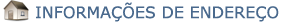
<style>
.page{position:relative;width:290px;height:23px;background:#ffffff}
.page>*{position:absolute;margin:0}
.t1{font:16px "Verdana";color:#49698d}
</style>
<div class="page">
<p class="t1" style="left:36px;top:2px;width:243px;height:20px">INFORMAÇÕES DE ENDEREÇO</p>
</div>
